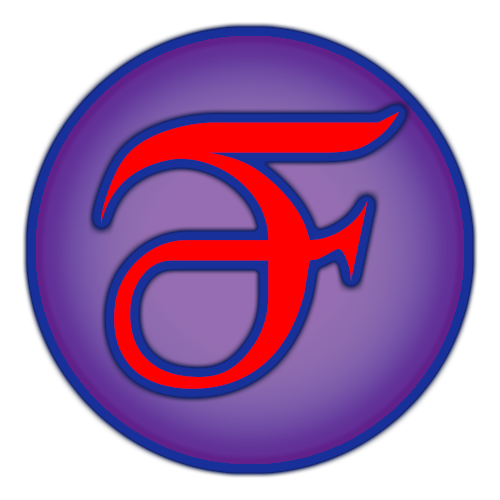
<style>
.page{position:relative;width:500px;height:500px;background:#ffffff}
.page>*{position:absolute;margin:0}
.t1{font:322.9px "BD-Merced";color:#ff0000}
</style>
<div class="page">
<p class="t1" style="left:101px;top:111px;width:299px;height:278px">F</p>
</div>
